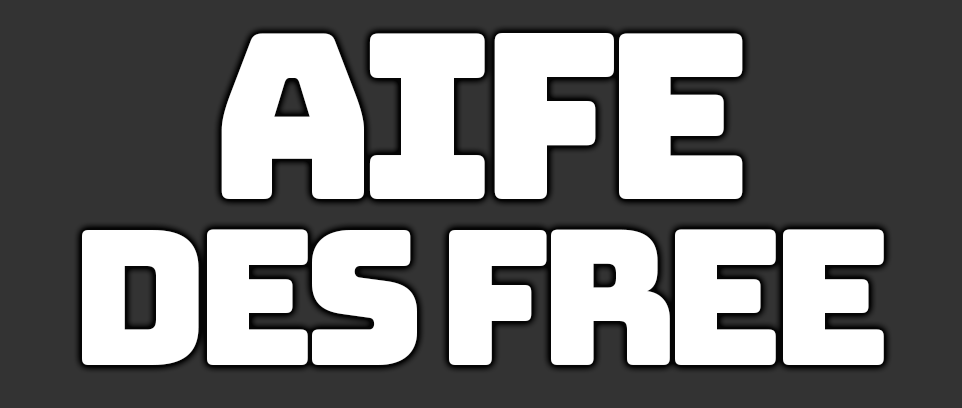
<style>
.page{position:relative;width:962px;height:408px;background:#333333}
.page>*{position:absolute;margin:0}
.t1{font:188px/166px "Bungee-Regular";letter-spacing:-0.08em;color:#ffffff}
.t2{font:230px/166px "Bungee-Regular";letter-spacing:-0.08em;color:#ffffff}
</style>
<div class="page">
<p class="t1" style="left:82px;top:33px;width:802px;height:332px;text-align:center"><span class="t2">Aife</span> <br>Des Free</p>
</div>
